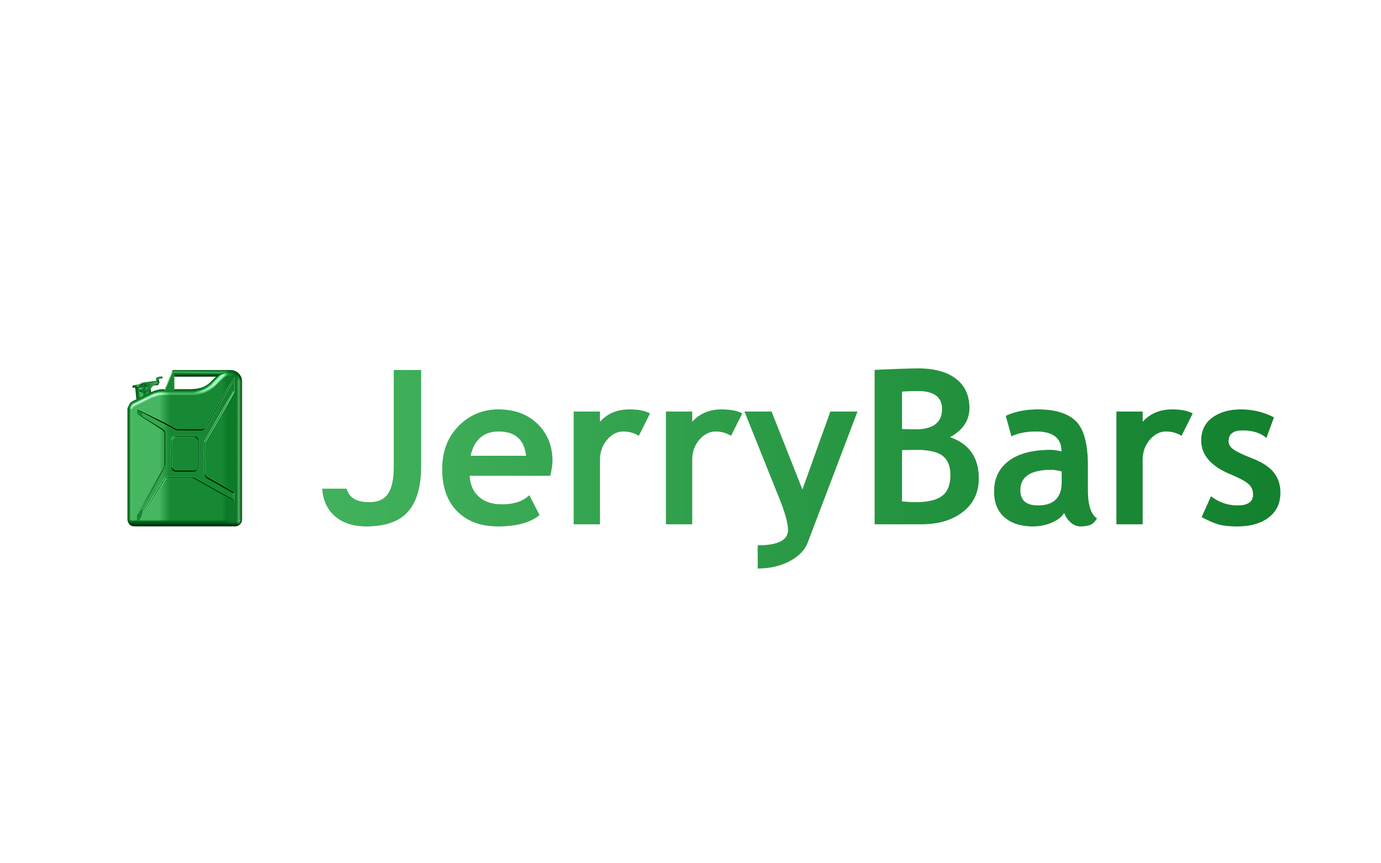
<style>
.page{position:relative;width:1381px;height:863px;background:#ffffff}
.page>*{position:absolute;margin:0}
.t1{font:215.8px "TrebuchetMS-Bold";color:#289743}
</style>
<div class="page">
<p class="t1" style="left:322px;top:369px;width:959px;height:200px">JerryBars</p>
</div>
